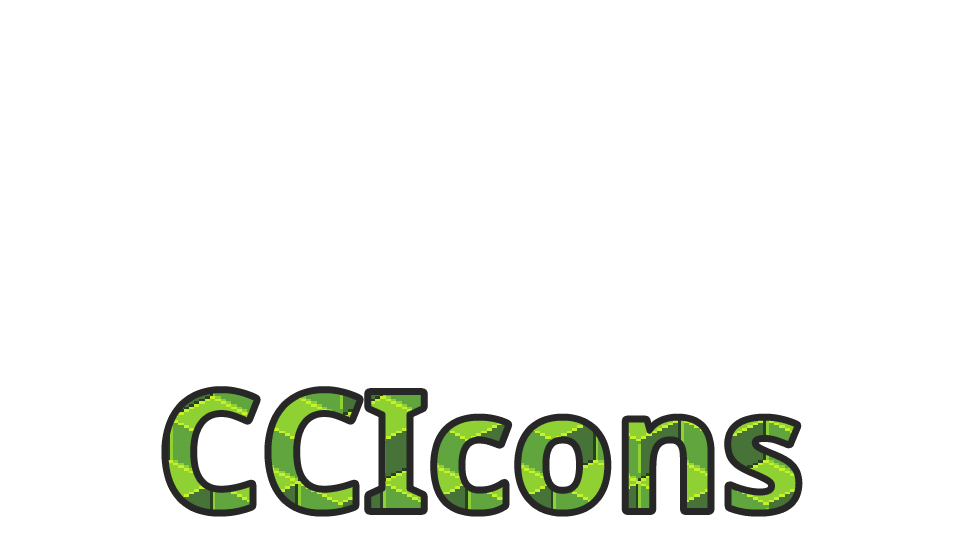
<style>
.page{position:relative;width:960px;height:540px;background:#ffffff}
.page>*{position:absolute;margin:0}
.t1{font:164px "NotoSans-Bold"}
</style>
<div class="page">
<p class="t1" style="left:166px;top:391px;width:632px;height:121px">CCIcons</p>
</div>
